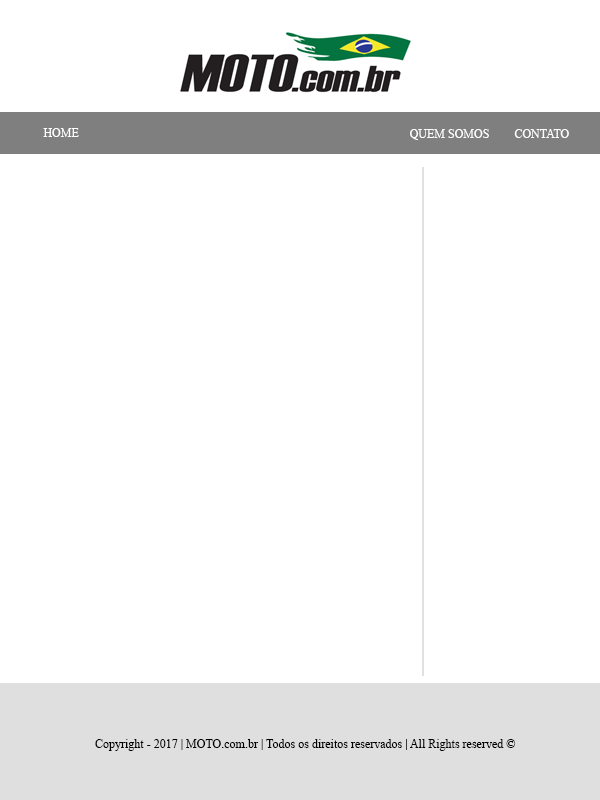
<style>
.page{position:relative;width:600px;height:800px;background:#ffffff}
.page>*{position:absolute;margin:0}
.t1{font:12px "TimesNewRomanPSMT";color:#ffffff}
.t2{font:12px "TimesNewRomanPSMT";color:#000000}
</style>
<div class="page">
<p class="t1" style="left:43px;top:128px;width:36px;height:9px">HOME</p>
<p class="t1" style="left:410px;top:129px;width:79px;height:11px">QUEM SOMOS</p>
<p class="t1" style="left:514px;top:129px;width:55px;height:9px">CONTATO</p>
<p class="t2" style="left:95px;top:739px;width:421px;height:12px">© Copyright - 2017 | MOTO.com.br | Todos os direitos reservados | All Rights reserved</p>
</div>
